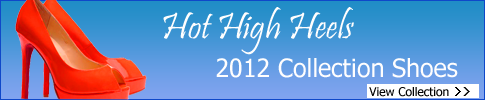
<style>
.page{position:relative;width:485px;height:100px}
.page>*{position:absolute;margin:0}
.t1{font:38px "Pristina-Regular";color:#fffefe}
.t2{font:25px "Tahoma";color:#fffefe}
.t3{font:12px "Tahoma";color:#010101}
.t4{font:14px "System";color:#010101}
</style>
<div class="page">
<p class="t1" style="left:163px;top:7px;width:191px;height:48px">Hot High Heels</p>
<p class="t2" style="left:216px;top:58px;width:242px;height:20px">2012 Collection Shoes</p>
<p class="t3" style="left:369px;top:87px;width:80px;height:10px">View Collection</p>
<p class="t4" style="left:455px;top:87px;width:15px;height:9px">&gt;&gt;</p>
</div>
